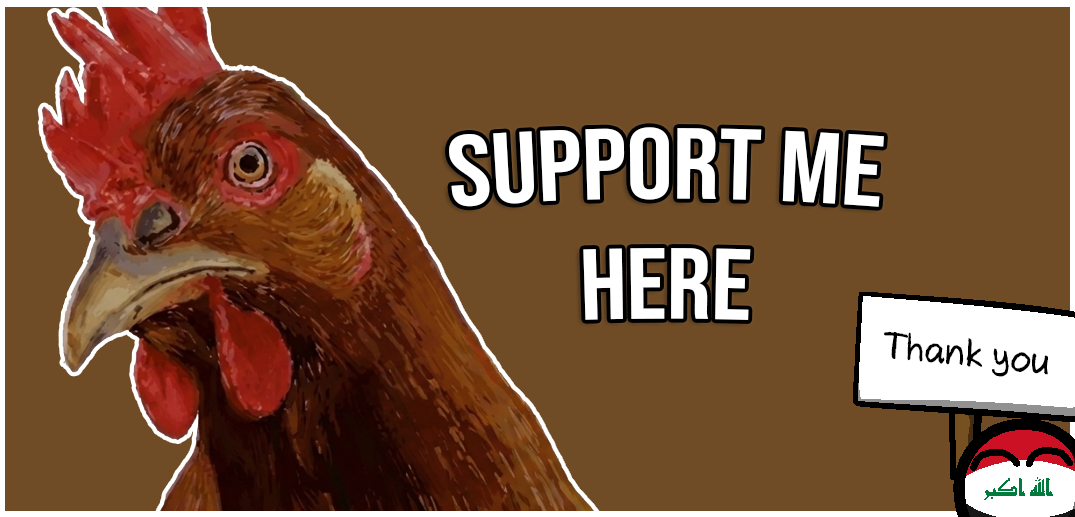
<style>
.page{position:relative;width:1075px;height:517px;background:#704c26}
.page>*{position:absolute;margin:0}
.t1{font:100px "BebasNeue-Regular";color:#ffffff}
.t2{font:36px "AxureHandwriting";color:#000000}
</style>
<div class="page">
<p class="t1" style="left:449px;top:127px;width:435px;height:193px;text-align:center">Support me <br>here</p>
<p class="t2" style="left:884px;top:331px;width:164px;height:46px;rotate:6deg">Thank you</p>
</div>
